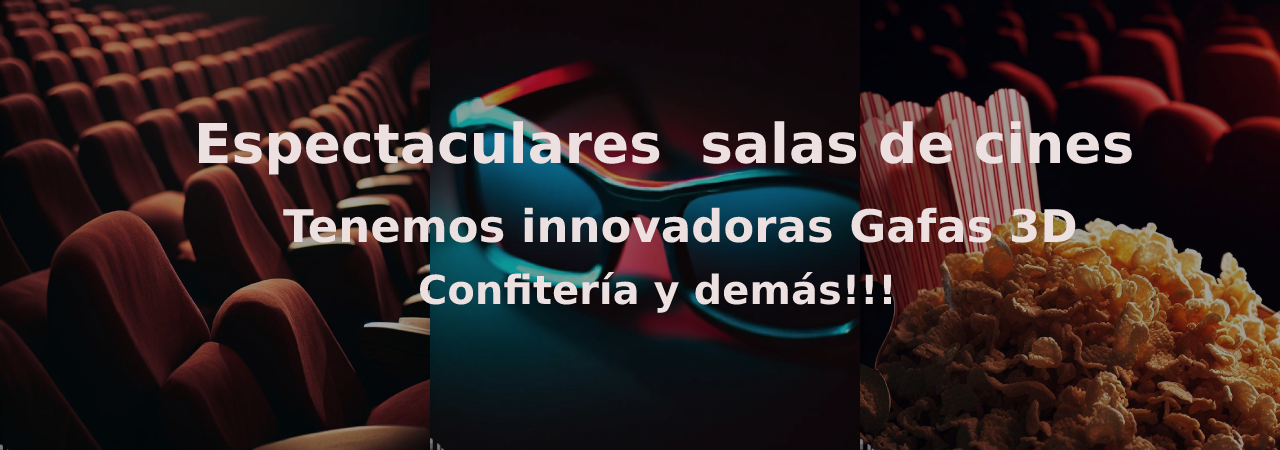
<style>
.page{position:relative;width:1280px;height:450px}
.page>*{position:absolute;margin:0}
.t1{font:55px "DejaVuSans-Bold";color:#ece0e0}
.t2{font:45px "DejaVuSans-Bold";color:#ece0e0}
.t3{font:40px "DejaVuSans-Bold";color:#ece0e0}
</style>
<div class="page">
<p class="t1" style="left:199px;top:121px;width:933px;height:54px">Espectaculares  salas de cines</p>
<p class="t2" style="left:283px;top:207px;width:793px;height:36px">Tenemos innovadoras Gafas 3D</p>
<p class="t3" style="left:419px;top:272px;width:472px;height:41px">Confitería y demás!!!</p>
</div>
